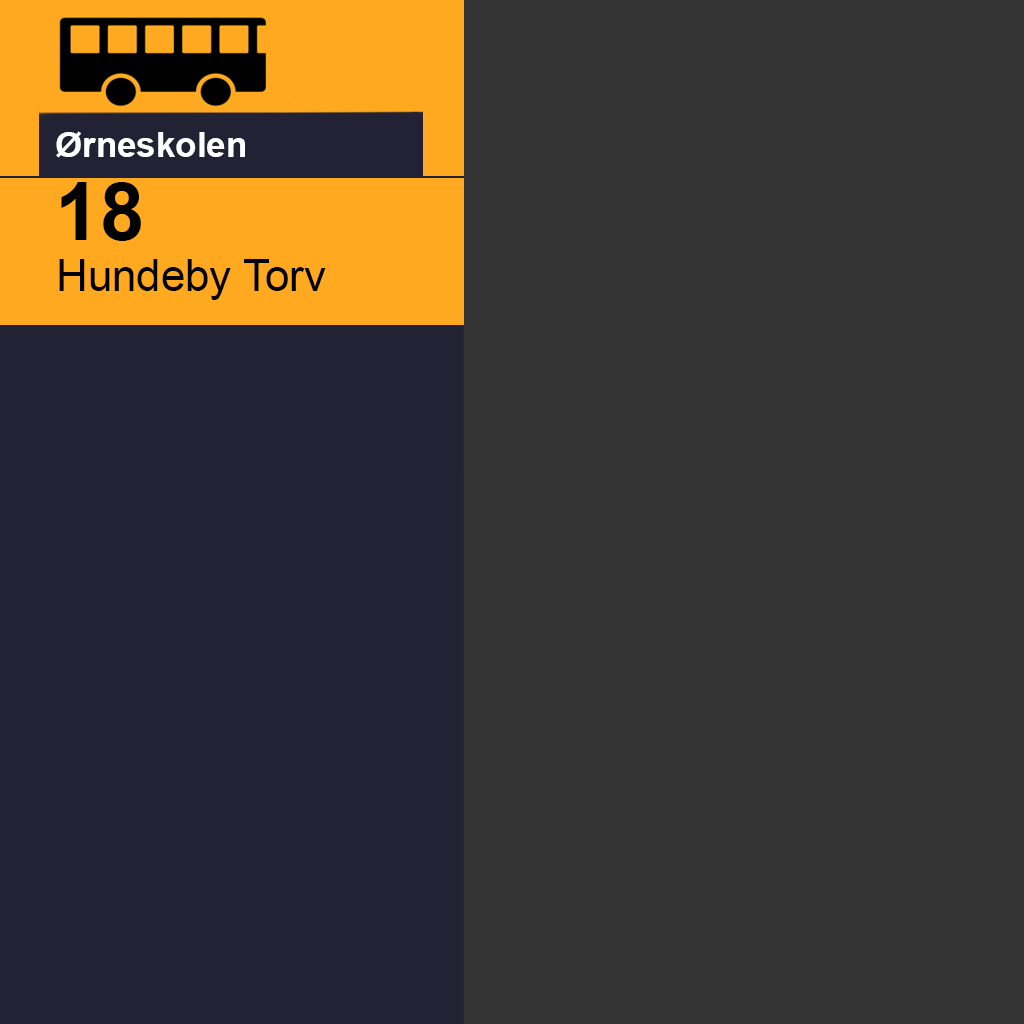
<style>
.page{position:relative;width:1024px;height:1024px;background:#333333}
.page>*{position:absolute;margin:0}
.t1{font:35px "Arial-BoldMT";color:#ffffff}
.t2{font:80px "Arial-BoldMT";color:#000000}
.t3{font:43.8px "ArialMT";color:#000000}
</style>
<div class="page">
<p class="t1" style="left:56px;top:131px;width:189px;height:27px">Ørneskolen</p>
<p class="t2" style="left:61px;top:182px;width:80px;height:59px">18</p>
<p class="t3" style="left:59px;top:259px;width:267px;height:41px">Hundeby Torv</p>
</div>
